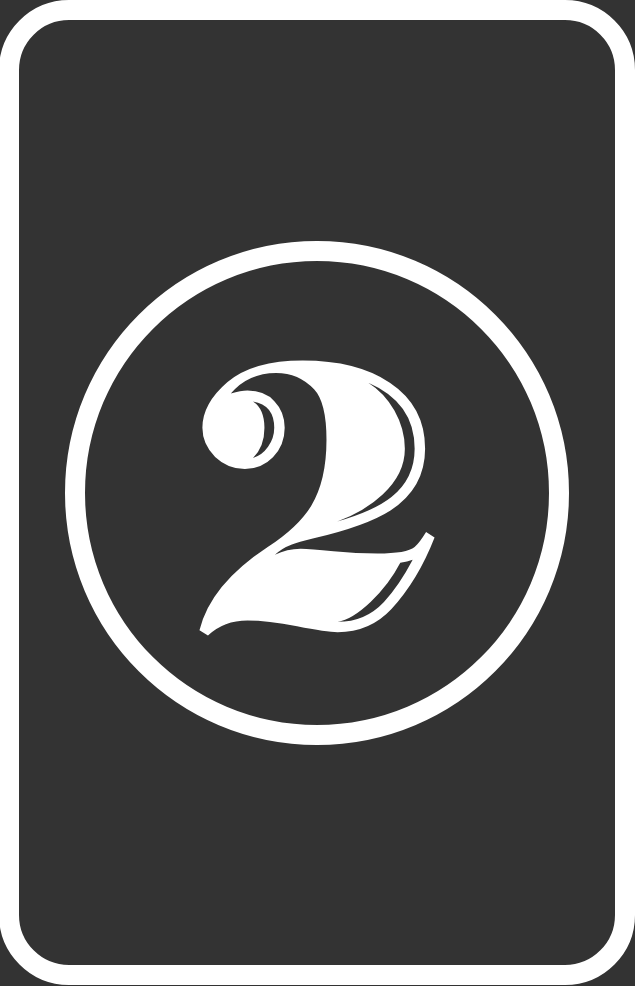
<style>
.page{position:relative;width:635px;height:986px;background:#333333}
.page>*{position:absolute;margin:0}
.t1{font:400px "BodoniHighlightICG";color:#ffffff}
</style>
<div class="page">
<p class="t1" style="left:199px;top:360px;width:236px;height:276px">2</p>
</div>
